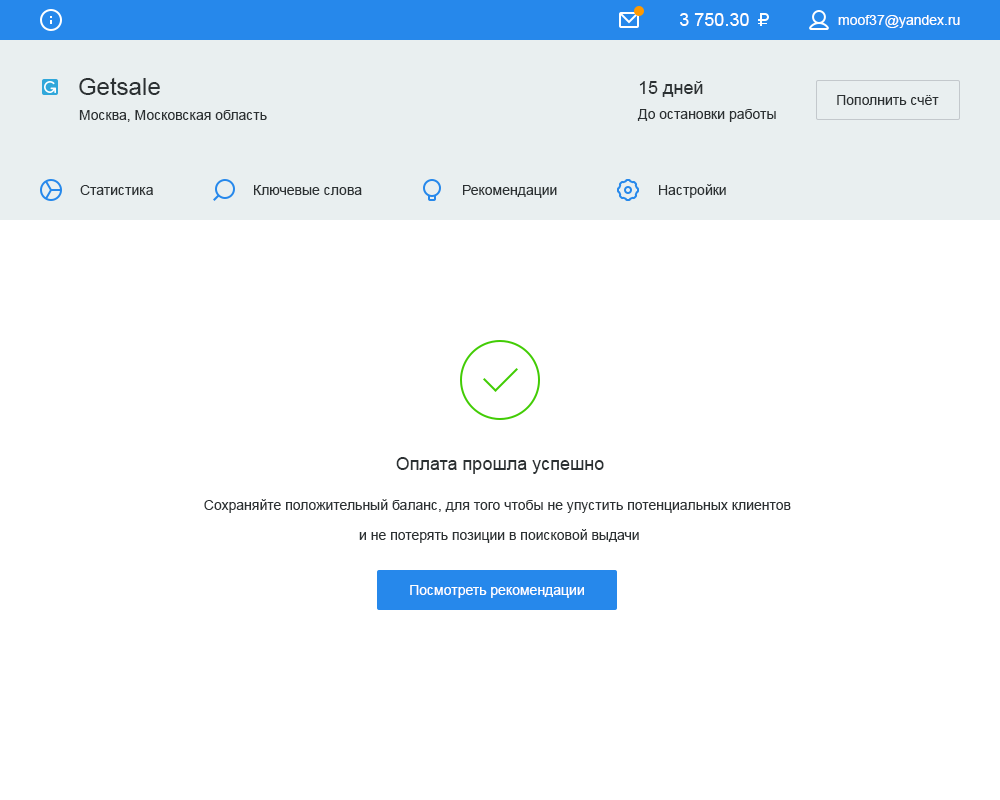
<style>
.page{position:relative;width:1000px;height:800px;background:#ffffff}
.page>*{position:absolute;margin:0}
.t1{font:18px "ArialMT";color:#ffffff}
.t2{font:14px "ArialMT";color:#ffffff}
.t3{font:24px "ArialMT";color:#2c3133}
.t4{font:18px "ArialMT";color:#2c3133}
.t5{font:14px "ArialMT";color:#2c3133}
.t6{font:14px/30px "ArialMT";color:#2c3133}
</style>
<div class="page">
<p class="t1" style="left:680px;top:13px;width:69px;height:13px">3 750.30</p>
<p class="t2" style="left:838px;top:15px;width:122px;height:13px">moof37@yandex.ru</p>
<p class="t3" style="left:79px;top:77px;width:81px;height:18px">Getsale</p>
<p class="t4" style="left:639px;top:81px;width:64px;height:16px">15 дней</p>
<p class="t5" style="left:837px;top:95px;width:102px;height:10px">Пополнить счёт</p>
<p class="t5" style="left:79px;top:110px;width:188px;height:12px">Москва, Московская область</p>
<p class="t5" style="left:637px;top:109px;width:139px;height:13px">До остановки работы</p>
<p class="t5" style="left:80px;top:185px;width:73px;height:10px">Статистика</p>
<p class="t5" style="left:254px;top:185px;width:108px;height:10px">Ключевые слова</p>
<p class="t5" style="left:463px;top:185px;width:94px;height:13px">Рекомендации</p>
<p class="t5" style="left:659px;top:184px;width:67px;height:14px">Настройки</p>
<p class="t4" style="left:396px;top:457px;width:208px;height:17px">Оплата прошла успешно</p>
<p class="t6" style="left:204px;top:499px;width:587px;height:44px;text-align:center">Сохраняйте положительный баланс, для того чтобы не упустить потенциальных клиентов <br>и не потерять позиции в поисковой выдачи</p>
<p class="t2" style="left:410px;top:585px;width:174px;height:13px">Посмотреть рекомендации</p>
</div>
